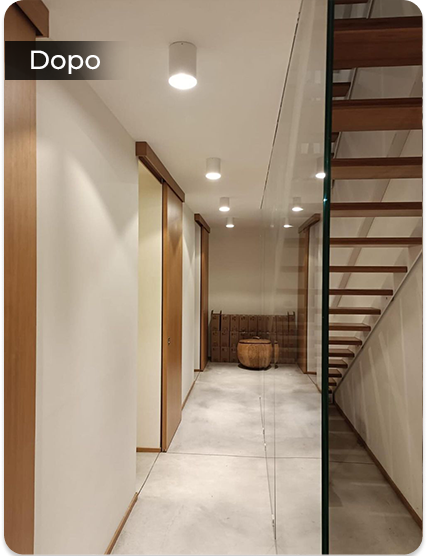
<style>
.page{position:relative;width:427px;height:556px}
.page>*{position:absolute;margin:0}
.t1{font:26.2px "Montserrat-Medium";color:#ffffff}
</style>
<div class="page">
<p class="t1" style="left:31px;top:50px;width:69px;height:24px">Dopo</p>
</div>
